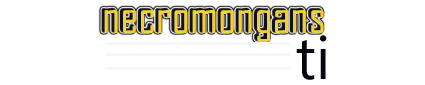
<style>
.page{position:relative;width:425px;height:85px;background:#ffffff}
.page>*{position:absolute;margin:0}
.t1{font:48px "AgencyFB-Reg";color:#f4ce37}
.t2{font:60px "Gadugi";color:#05070f}
</style>
<div class="page">
<p class="t1" style="left:104px;top:10px;width:220px;height:32px">necromongans</p>
<p class="t1" style="left:104px;top:10px;width:220px;height:32px">necromongans</p>
<p class="t2" style="left:296px;top:35px;width:31px;height:45px">ti</p>
</div>
